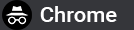
<style>
.page{position:relative;width:134px;height:30px;background:#35363a}
.page>*{position:absolute;margin:0}
.t1{font:21.3px "Roboto-Medium";color:#ffffff}
</style>
<div class="page">
<p class="t1" style="left:40px;top:6px;width:77px;height:16px">Chrome</p>
</div>
